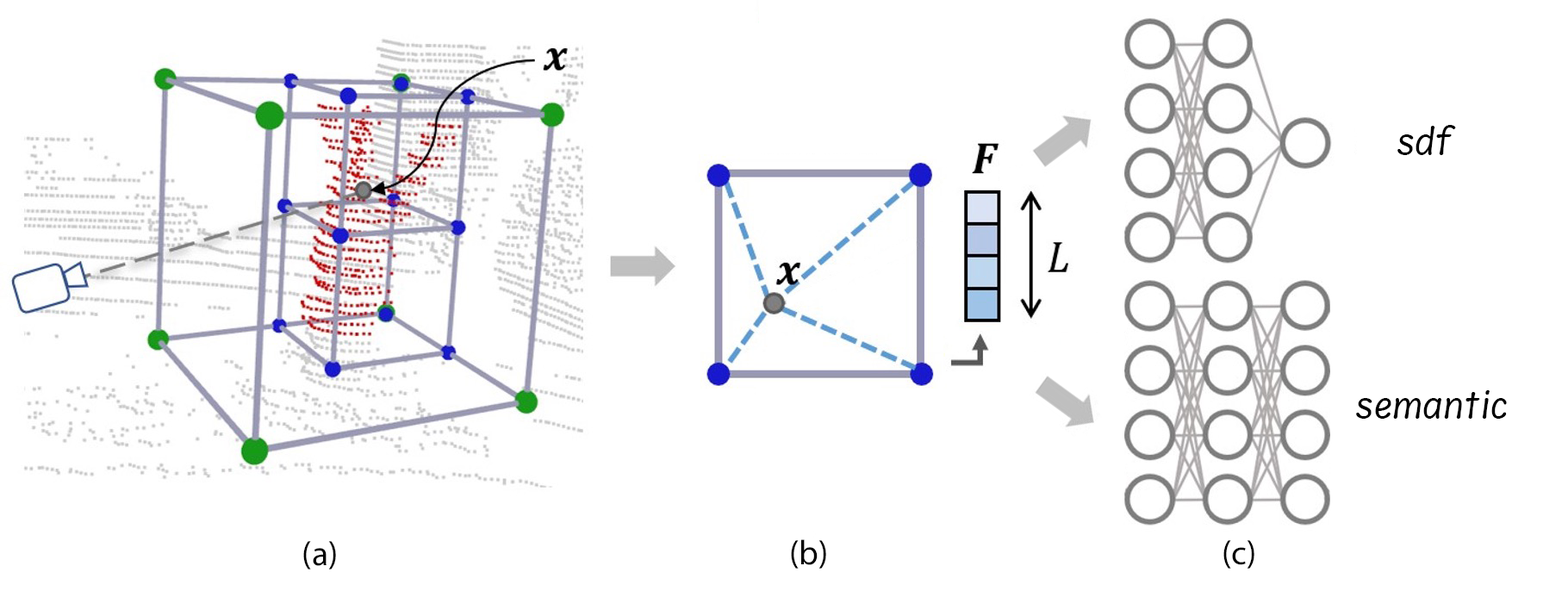
<style>
.page{position:relative;width:1568px;height:591px;background:#ffffff}
.page>*{position:absolute;margin:0}
.t1{font:34.5px "AnnaiMN-Regular";color:#000000}
.t2{font:34.5px "MyriadPro-Regular";color:#000000}
</style>
<div class="page">
<p class="t1" style="left:1397px;top:125px;width:59px;height:30px">sdf</p>
<p class="t1" style="left:1356px;top:390px;width:151px;height:29px">semantic</p>
<p class="t2" style="left:303px;top:541px;width:33px;height:28px">(a)</p>
<p class="t2" style="left:791px;top:539px;width:35px;height:30px">(b)</p>
<p class="t2" style="left:1223px;top:540px;width:31px;height:29px">(c)</p>
</div>
